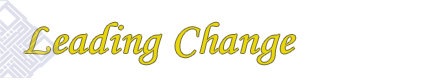
<style>
.page{position:relative;width:425px;height:80px;background:#ffffff}
.page>*{position:absolute;margin:0}
.t1{font:44px "MonotypeCorsiva";letter-spacing:0.005em;color:#ead706;scale:1.08 1}
</style>
<div class="page">
<p class="t1" style="left:24px;top:22px;width:272px;height:43px">Leading Change</p>
</div>
